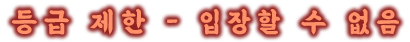
<style>
.page{position:relative;width:410px;height:42px;background:#ffffff}
.page>*{position:absolute;margin:0}
.t1{font:28px "BMEULJIROTTF";letter-spacing:0.24em;color:#ff916a}
</style>
<div class="page">
<p class="t1" style="left:11px;top:8px;width:388px;height:27px">등급 제한 - 입장할 수 없음</p>
</div>
